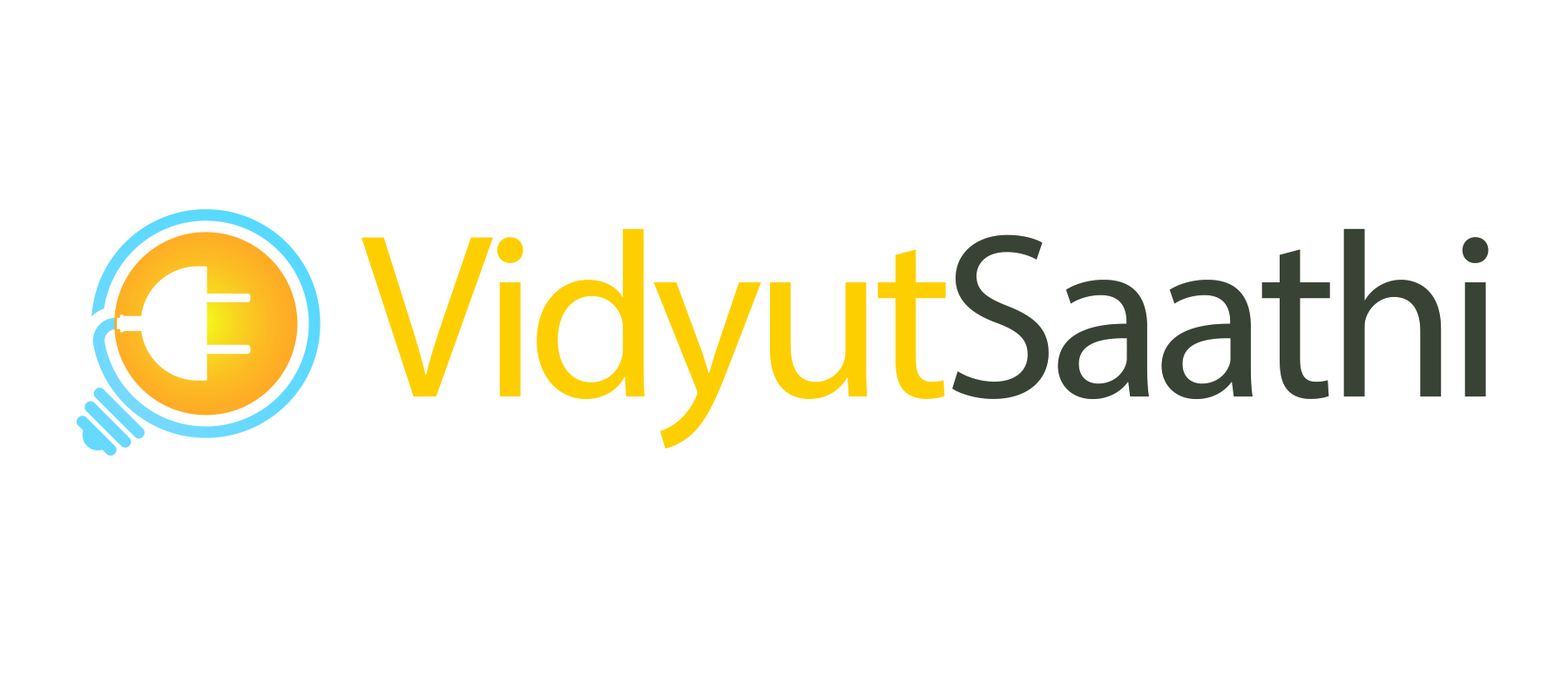
<style>
.page{position:relative;width:1568px;height:697px;background:#ffffff}
.page>*{position:absolute;margin:0}
.t1{font:235.8px "MyriadConceptRoman-Regular";letter-spacing:-0.04em;color:#fecf00}
.t2{font:235.8px "MyriadConceptRoman-Regular";letter-spacing:-0.04em;color:#3a4335}
</style>
<div class="page">
<p class="t1" style="left:361px;top:228px;width:1128px;height:221px">Vidyut<span class="t2">Saathi</span></p>
</div>
